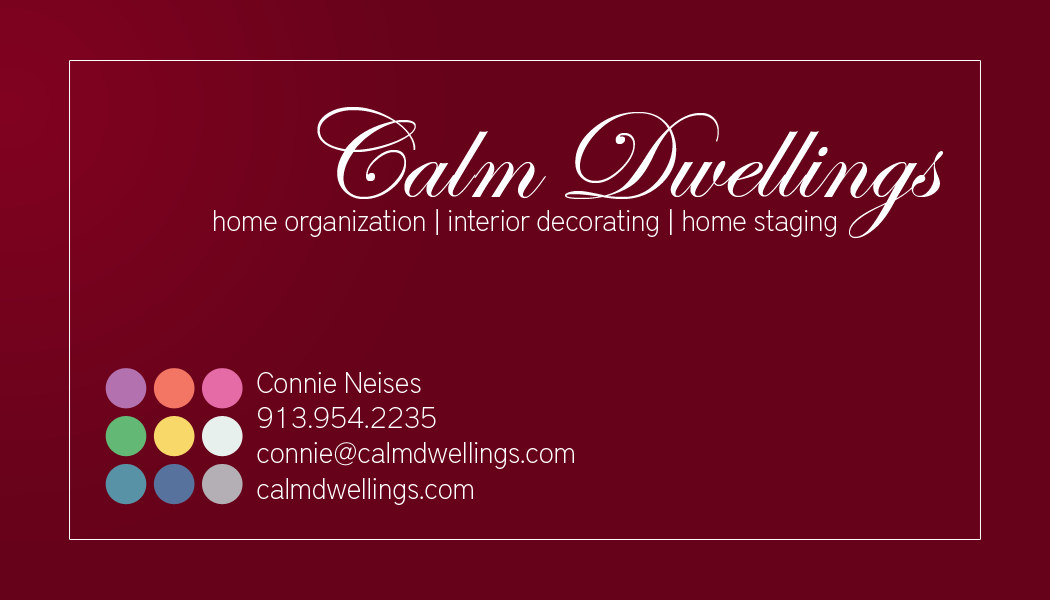
<style>
.page{position:relative;width:1050px;height:600px;background:#66021a}
.page>*{position:absolute;margin:0}
.t1{font:129.4px "EdwardianScriptITC";color:#ffffff}
.t2{font:29.3px "DistrictPro-Thin";color:#ffffff}
</style>
<div class="page">
<p class="t1" style="left:317px;top:107px;width:626px;height:132px">Calm Dwellings</p>
<p class="t2" style="left:214px;top:209px;width:622px;height:28px">home organization | interior decorating | home staging</p>
<p class="t2" style="left:257px;top:372px;width:317px;height:133px">Connie Neises<br>913.954.2235<br>connie@calmdwellings.com<br>calmdwellings.com</p>
</div>
